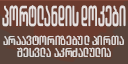
<style>
.page{position:relative;width:128px;height:64px;background:#6b3b2e}
.page>*{position:absolute;margin:0}
.t1{font:28.8px "ArchyEDT-Bold";color:#e6e1e0;scale:0.54 1}
.t2{font:13px/12px "ArchyEDT-Bold";color:#dedad8;scale:0.97 1}
</style>
<div class="page">
<p class="t1" style="left:2px;top:5px;width:124px;height:22px">პორტლანდის დოკები</p>
<p class="t2" style="left:3px;top:35px;width:121px;height:22px;text-align:center">არაავტორიზებულ პირთა <br>შესვლა აკრძალულია</p>
</div>
